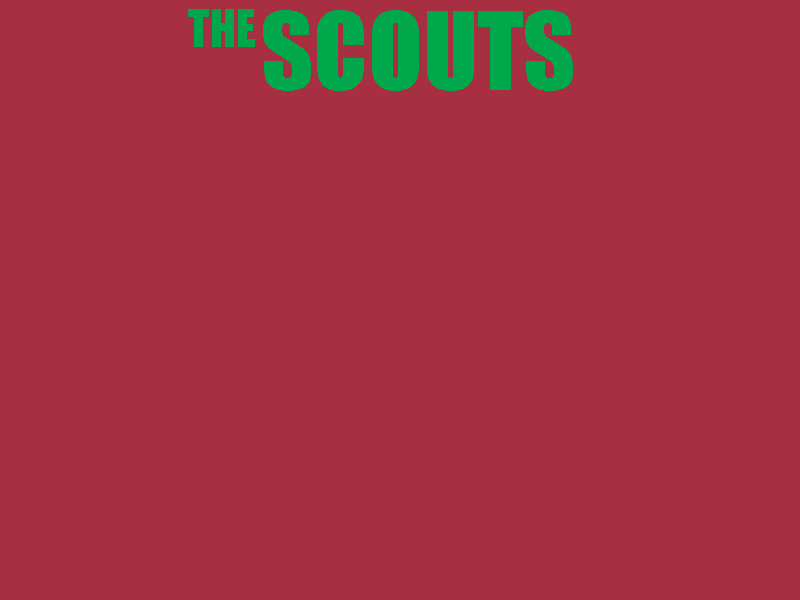
<style>
.page{position:relative;width:800px;height:600px;background:#a82e42}
.page>*{position:absolute;margin:0}
.t1{font:48px "Impact";color:#00a84b}
.t2{font:100px "Impact";color:#00a84b}
</style>
<div class="page">
<p class="t1" style="left:188px;top:9px;width:67px;height:38px">THE</p>
<p class="t2" style="left:263px;top:10px;width:310px;height:81px">SCOUTS</p>
</div>
